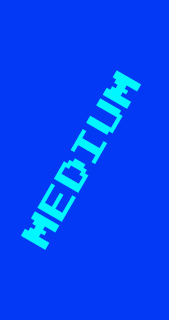
<style>
.page{position:relative;width:169px;height:320px;background:#0338f4}
.page>*{position:absolute;margin:0}
.t1{font:40px "JoystixMonospace-Regular";color:#00f7ff}
</style>
<div class="page">
<p class="t1" style="left:21px;top:70px;width:120px;height:180px;rotate:-60deg">medium</p>
</div>
